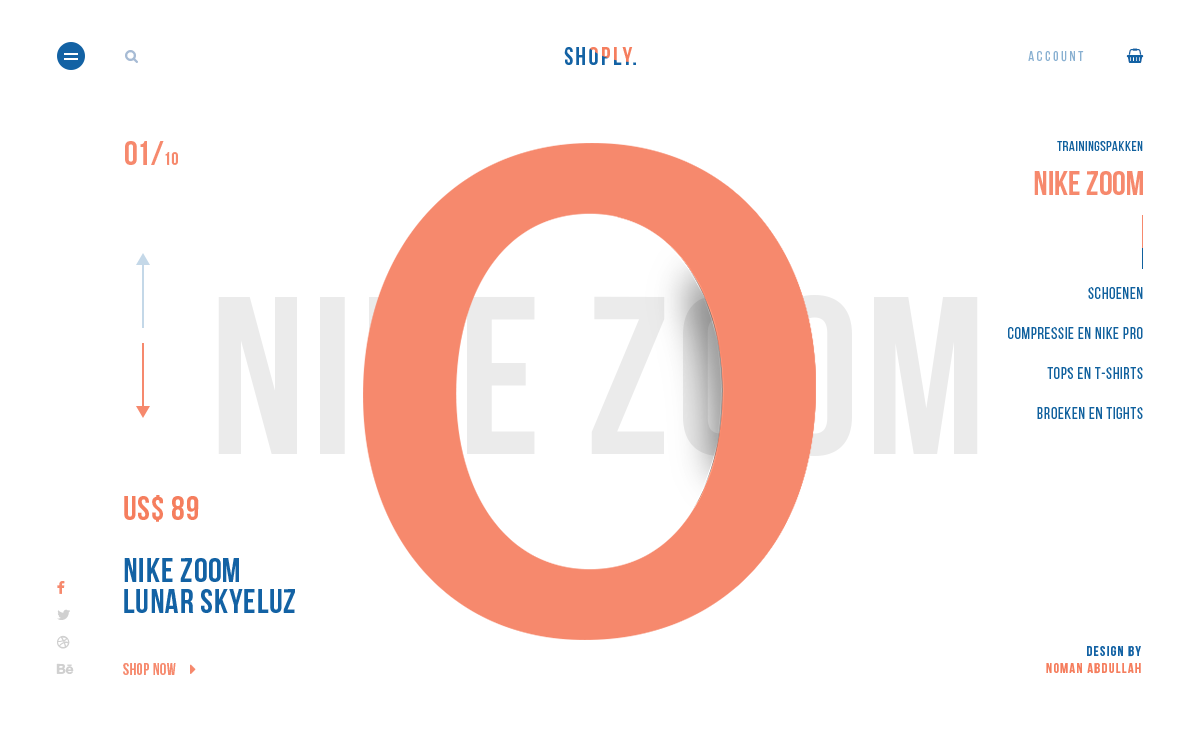
<style>
.page{position:relative;width:1200px;height:750px;background:#ffffff}
.page>*{position:absolute;margin:0}
.t1{font:24.9px "BebasNeueBold";letter-spacing:0.1em;color:#1362a4}
.t2{font:14px "BebasNeueRegular";letter-spacing:0.2em;color:#89b0d1;text-transform:uppercase}
.t3{font:34px "BebasNeueBold";color:#f6896d;text-transform:uppercase}
.t4{font:18px "BebasNeueBold";color:#f6896d;text-transform:uppercase}
.t5{font:14px "BebasNeueRegular";letter-spacing:0.05em;color:#11619e;text-transform:uppercase}
.t6{font:224.6px "BebasNeueBold";letter-spacing:0.025em;text-transform:uppercase}
.t7{font:16px "BebasNeueRegular";letter-spacing:0.05em;color:#11619e;text-transform:uppercase}
.t8{font:14px "BebasNeueBold";letter-spacing:0.1em;color:#f57e5e}
.t9{font:14px "BebasNeueBold";letter-spacing:0.1em;color:#1362a4}
</style>
<div class="page">
<p class="t1" style="left:564px;top:47px;width:72px;height:18px">Shoply.</p>
<p class="t2" style="left:1028px;top:51px;width:56px;height:11px">Account</p>
<p class="t3" style="left:125px;top:141px;width:53px;height:24px">01/<span class="t4">10</span></p>
<p class="t5" style="left:1057px;top:141px;width:86px;height:10px">Trainingspakken</p>
<p class="t3" style="left:1034px;top:171px;width:109px;height:24px">Nike Zoom</p>
<p class="t6" style="left:218px;top:294px;width:760px;height:162px">Nike Zoom</p>
<p class="t7" style="left:1088px;top:287px;width:55px;height:12px">Schoenen</p>
<p class="t7" style="left:1008px;top:327px;width:135px;height:12px">Compressie en Nike Pro</p>
<p class="t7" style="left:1047px;top:367px;width:96px;height:12px">Tops en T-shirts</p>
<p class="t7" style="left:1037px;top:407px;width:106px;height:12px">Broeken en tights</p>
<p class="t8" style="left:1046px;top:646px;width:95px;height:28px;text-align:right"><span class="t9">Design By</span><br>Noman Abdullah</p>
</div>
